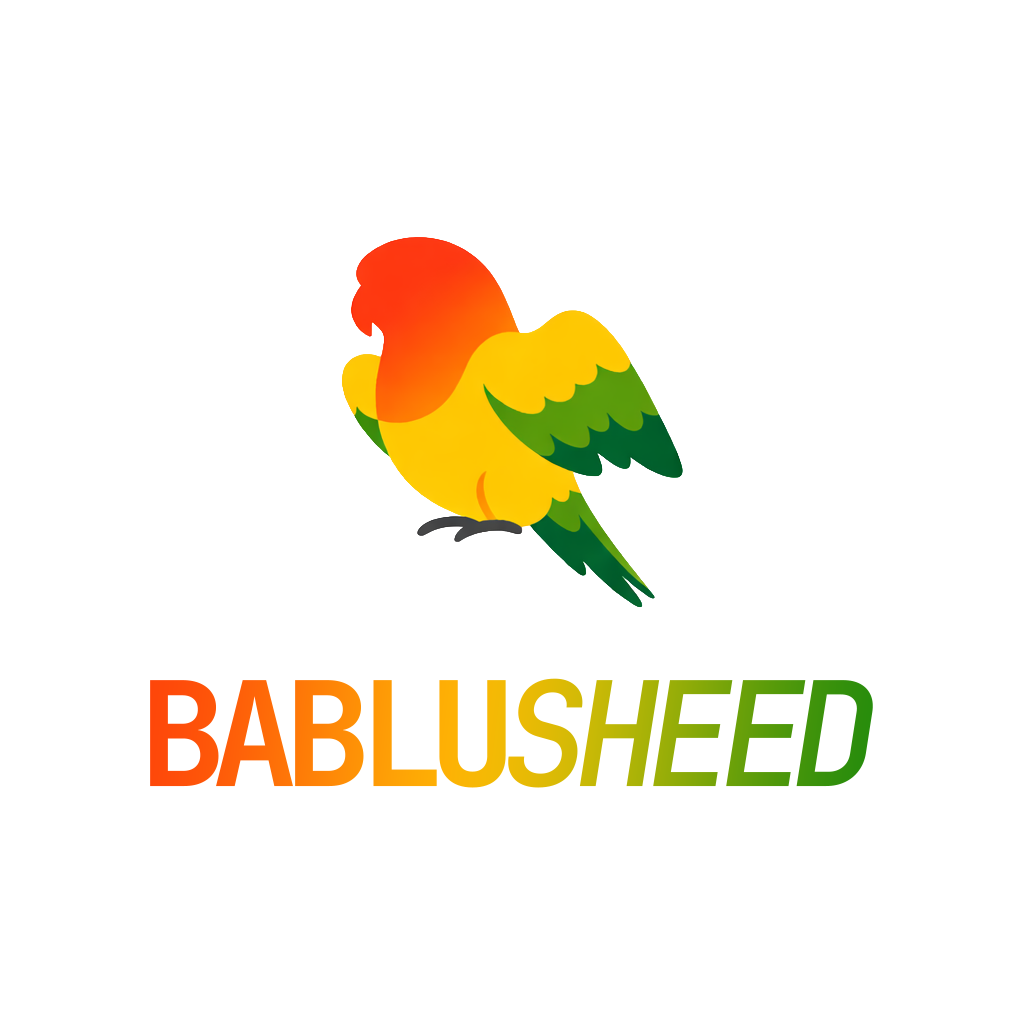
<style>
.page{position:relative;width:1024px;height:1024px;background:#ffffff}
.page>*{position:absolute;margin:0}
.t1{font:145px "JetBrainsMono-Bold";letter-spacing:-0.1em;text-transform:uppercase}
.t2{font:145px "JetBrainsMonoItalic-SemiBoldItalic";letter-spacing:-0.1em;text-transform:uppercase}
</style>
<div class="page">
<p class="t1" style="left:150px;top:678px;width:723px;height:110px">Bablu<span class="t2">sheed</span></p>
</div>
